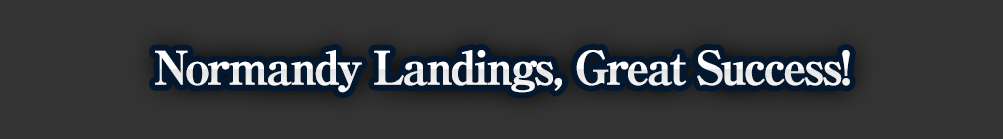
<style>
.page{position:relative;width:1003px;height:139px;background:#333333}
.page>*{position:absolute;margin:0}
.t1{font:46px "RyuminPro-ExBold";letter-spacing:-0.08em;color:#ffffff;font-weight:bold}
</style>
<div class="page">
<p class="t1" style="left:155px;top:50px;width:695px;height:43px">Normandy Landings, Great Success!</p>
</div>
